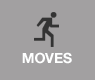
<style>
.page{position:relative;width:95px;height:80px;background:#a2a0a1}
.page>*{position:absolute;margin:0}
.t1{font:14px "HelveticaNeue-Bold";color:#feffff}
</style>
<div class="page">
<p class="t1" style="left:22px;top:52px;width:50px;height:12px">MOVES</p>
</div>
